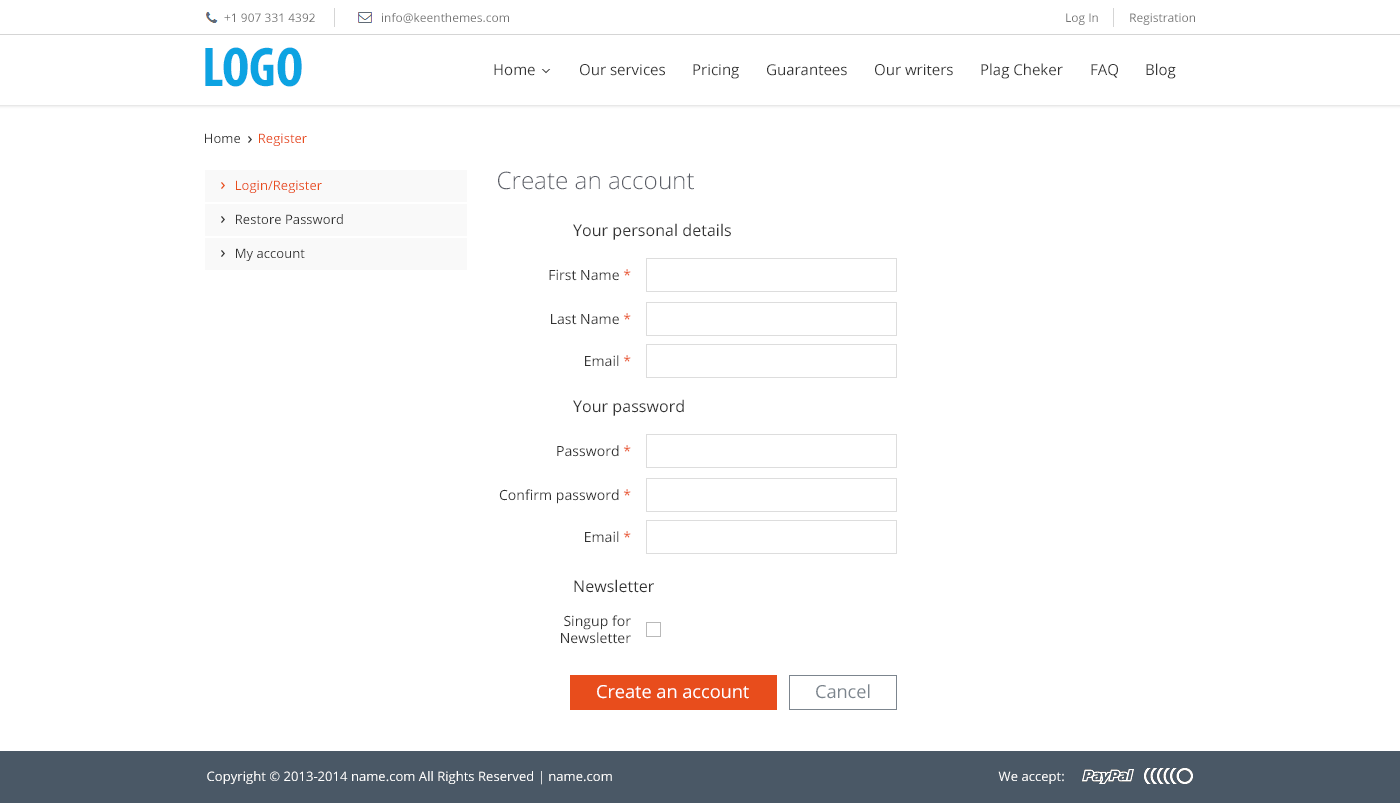
<style>
.page{position:relative;width:1400px;height:803px;background:#ffffff}
.page>*{position:absolute;margin:0}
.t1{font:12px "OpenSans";color:#737373}
.t2{font:56.6px "MyriadPro-BoldCond";color:#0da3e2}
.t3{font:15px "OpenSans";color:#333333}
.t4{font:13px "OpenSans";color:#e84d1c}
.t5{font:13px "OpenSans";color:#333333}
.t6{font:24px "OpenSans-Light";color:#5a5d66}
.t7{font:16px "OpenSans";color:#333333}
.t8{font:14px "OpenSans";color:#333333}
.t9{font:14px "OpenSans";color:#e84d1c}
.t10{font:18px "OpenSans";color:#ffffff}
.t11{font:18px "OpenSans";color:#7c858e}
</style>
<div class="page">
<p class="t1" style="left:224px;top:13px;width:91px;height:9px">+1 907 331 4392</p>
<p class="t1" style="left:382px;top:13px;width:127px;height:10px">info@keenthemes.com</p>
<p class="t1" style="left:1066px;top:13px;width:32px;height:12px">Log In</p>
<p class="t1" style="left:1130px;top:13px;width:65px;height:12px">Registration</p>
<p class="t2" style="left:205px;top:47px;width:97px;height:40px">LOGO</p>
<p class="t3" style="left:494px;top:64px;width:41px;height:12px">Home</p>
<p class="t3" style="left:580px;top:64px;width:85px;height:12px">Our services</p>
<p class="t3" style="left:693px;top:64px;width:46px;height:15px">Pricing</p>
<p class="t3" style="left:767px;top:64px;width:80px;height:12px">Guarantees</p>
<p class="t3" style="left:875px;top:64px;width:78px;height:12px">Our writers</p>
<p class="t3" style="left:981px;top:63px;width:82px;height:16px">Plag Cheker</p>
<p class="t3" style="left:1091px;top:64px;width:27px;height:14px">FAQ</p>
<p class="t3" style="left:1146px;top:63px;width:30px;height:16px">Blog</p>
<p class="t4" style="left:205px;top:133px;width:102px;height:13px"><span class="t5">Home     </span>Register</p>
<p class="t6" style="left:498px;top:171px;width:196px;height:19px">Create an account</p>
<p class="t4" style="left:236px;top:180px;width:86px;height:13px">Login/Register</p>
<p class="t5" style="left:236px;top:214px;width:107px;height:10px">Restore Password</p>
<p class="t7" style="left:573px;top:223px;width:158px;height:17px">Your personal details</p>
<p class="t5" style="left:236px;top:248px;width:69px;height:13px">My account</p>
<p class="t8" style="left:549px;top:269px;width:82px;height:12px">First Name <span class="t9">*</span></p>
<p class="t8" style="left:551px;top:313px;width:80px;height:12px">Last Name <span class="t9">*</span></p>
<p class="t8" style="left:585px;top:355px;width:46px;height:12px">Email <span class="t9">*</span></p>
<p class="t7" style="left:573px;top:399px;width:111px;height:17px">Your password</p>
<p class="t8" style="left:557px;top:445px;width:74px;height:12px">Password <span class="t9">*</span></p>
<p class="t8" style="left:499px;top:489px;width:132px;height:15px">Confirm password <span class="t9">*</span></p>
<p class="t8" style="left:585px;top:531px;width:46px;height:12px">Email <span class="t9">*</span></p>
<p class="t7" style="left:574px;top:579px;width:80px;height:14px">Newsletter</p>
<p class="t8" style="left:561px;top:615px;width:70px;height:29px;text-align:right">Singup for<br>Newsletter</p>
<p class="t10" style="left:597px;top:685px;width:152px;height:14px">Create an account</p>
<p class="t11" style="left:816px;top:684px;width:54px;height:15px">Cancel</p>
</div>
